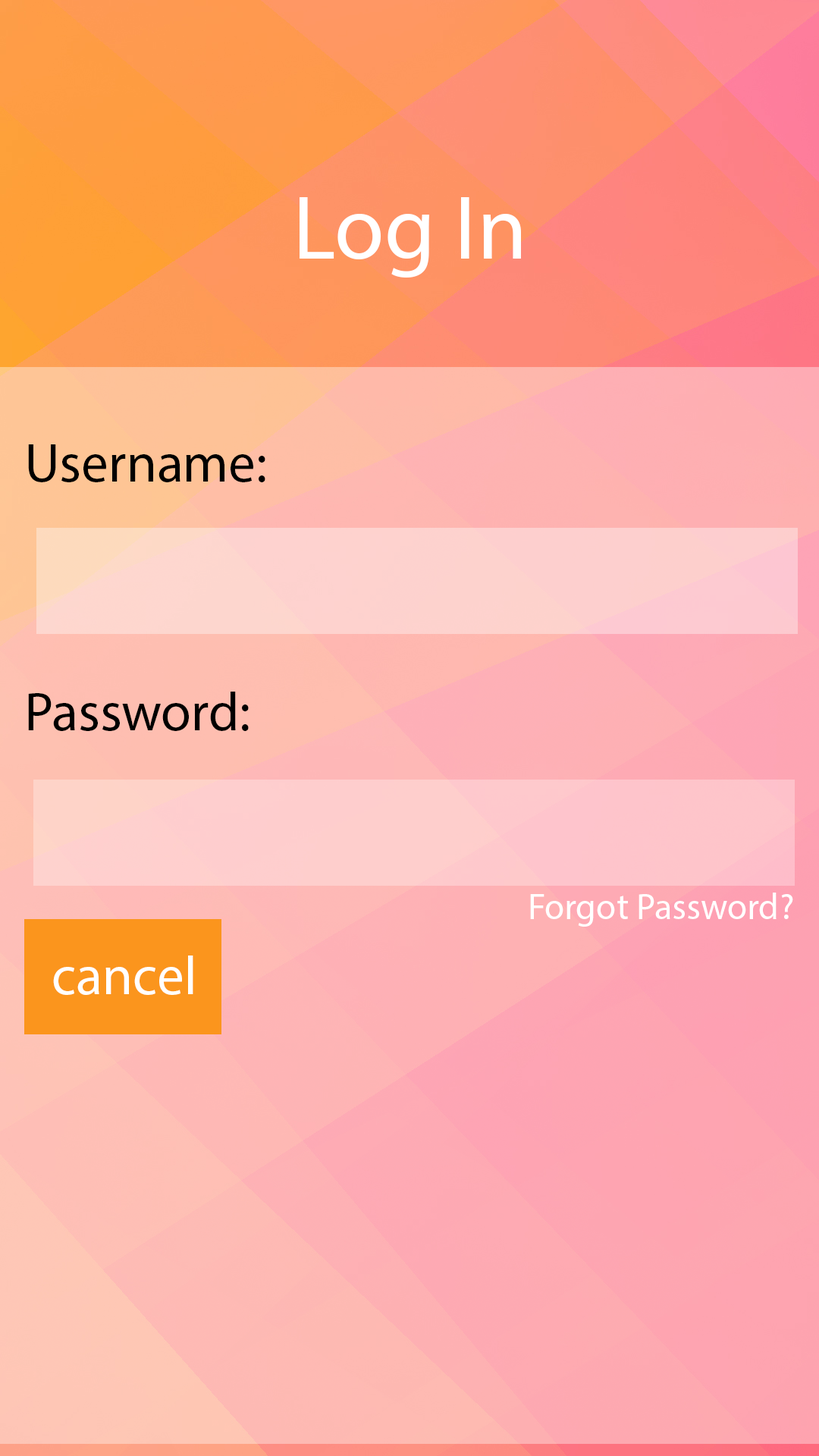
<style>
.page{position:relative;width:819px;height:1456px}
.page>*{position:absolute;margin:0}
.t1{font:91px "MyriadPro-Regular";color:#ffffff}
.t2{font:54.6px "MyriadPro-Regular";color:#000000}
.t3{font:36.4px "MyriadPro-Regular";color:#ffffff}
.t4{font:54.6px "MyriadPro-Regular";color:#ffffff}
</style>
<div class="page">
<p class="t1" style="left:300px;top:197px;width:221px;height:81px">Log In</p>
<p class="t2" style="left:28px;top:444px;width:237px;height:38px">Username:</p>
<p class="t2" style="left:28px;top:692px;width:221px;height:39px">Password:</p>
<p class="t3" style="left:530px;top:893px;width:263px;height:34px">Forgot Password?</p>
<p class="t4" style="left:53px;top:955px;width:140px;height:40px">cancel</p>
</div>
